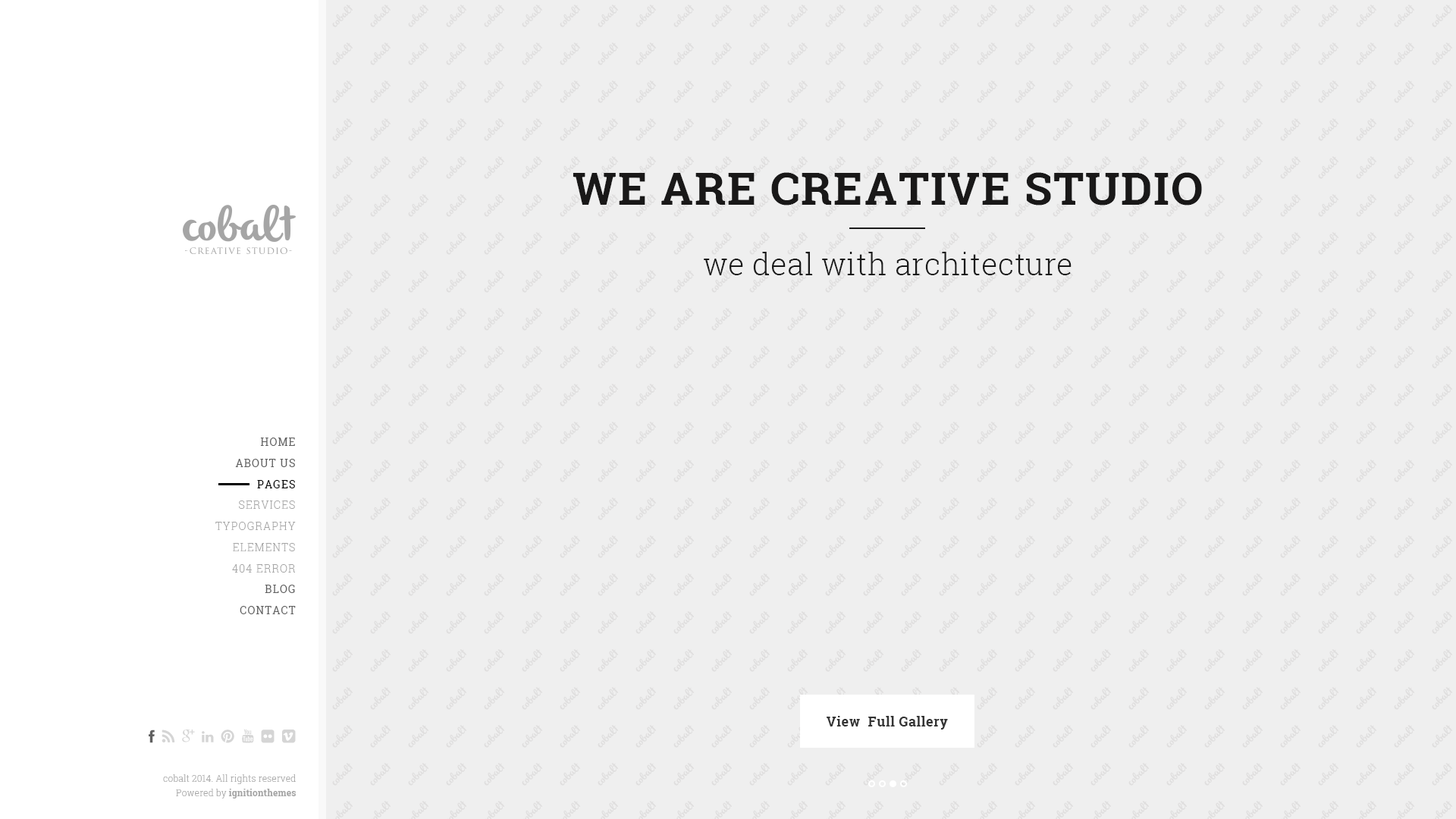
<style>
.page{position:relative;width:1456px;height:819px;background:#efefef}
.page>*{position:absolute;margin:0}
.t1{font:45.5px "RobotoSlab-Bold";letter-spacing:0.03em;color:#191818;text-transform:uppercase}
.t2{font:30.3px "RobotoSlab-Light";letter-spacing:0.01em;color:#1a1a1a}
.t3{font:10.6px/21.2px "RobotoSlab-Regular";letter-spacing:0.08em;color:#606060}
.t4{font:10.6px/21.2px "RobotoSlab-Regular";letter-spacing:0.08em;color:#000000}
.t5{font:10.6px/21.2px "RobotoSlab-Light";letter-spacing:0.08em;color:#a5a5a5}
.t6{font:13.6px "RobotoSlab-Bold";letter-spacing:0.03em;color:#343434}
.t7{font:9.1px/14.4px "RobotoSlab-Light";letter-spacing:0.01em;color:#a5a5a5}
.t8{font:9.1px/14.4px "RobotoSlab-Bold";letter-spacing:0.01em;color:#a5a5a5}
</style>
<div class="page">
<p class="t1" style="left:573px;top:172px;width:629px;height:34px">WE ARE CREATIVE STUDIO</p>
<p class="t2" style="left:704px;top:252px;width:368px;height:23px">we deal with architecture</p>
<p class="t3" style="left:235px;top:438px;width:60px;height:50px;text-align:right">HOME<br>ABOUT US<br><span class="t4">PAGES</span></p>
<p class="t5" style="left:215px;top:500px;width:81px;height:73px;text-align:right">SERVICES<br>TYPOGRAPHY<br>ELEMENTS<br>404 ERROR</p>
<p class="t3" style="left:240px;top:585px;width:56px;height:29px;text-align:right">BLOG<br>CONTACT</p>
<p class="t6" style="left:827px;top:716px;width:121px;height:14px">View  Full Gallery</p>
<p class="t7" style="left:163px;top:774px;width:133px;height:25px;text-align:right">cobalt 2014. All rights reserved<br>Powered by <span class="t8">ignitionthemes</span></p>
</div>
